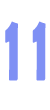
<style>
.page{position:relative;width:50px;height:110px;background:#ffffff}
.page>*{position:absolute;margin:0}
.t1{font:96px "BerlinSansFBDemi-Bold";color:#7f90f4;scale:0.5 1}
</style>
<div class="page">
<p class="t1" style="left:5px;top:21px;width:41px;height:60px">1 1</p>
</div>
